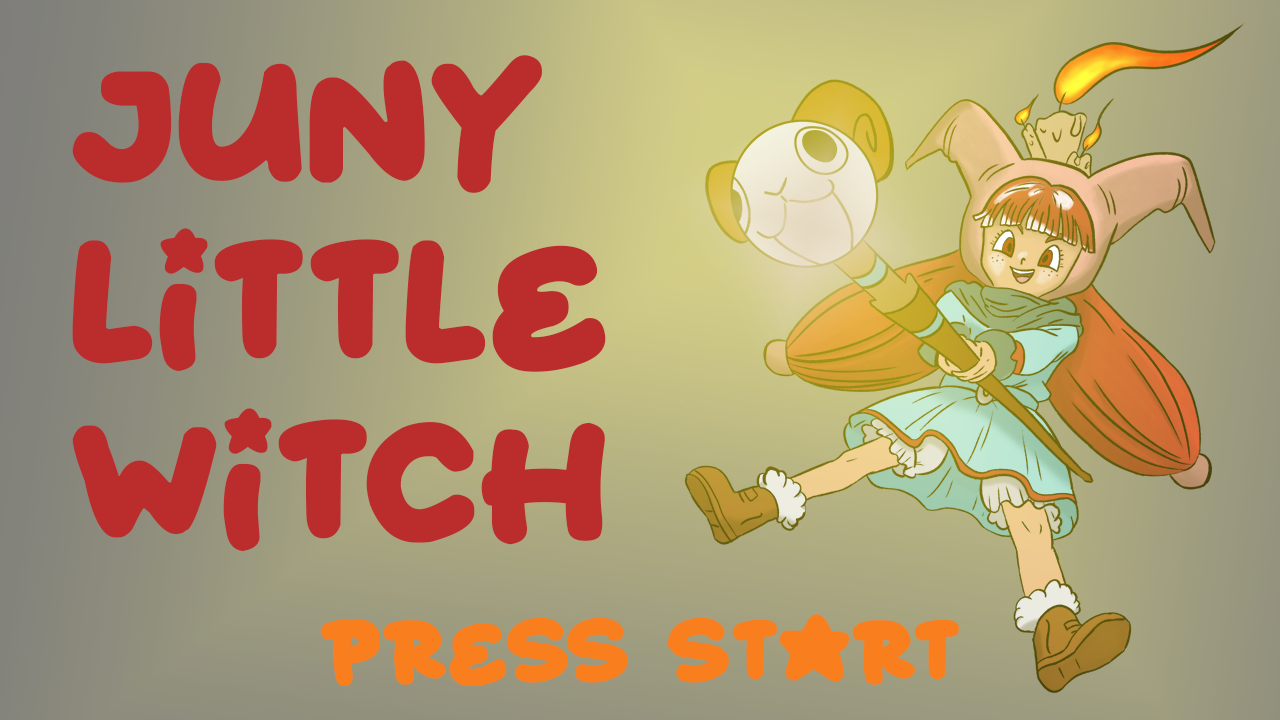
<style>
.page{position:relative;width:1280px;height:720px}
.page>*{position:absolute;margin:0}
.t1{font:150px "Starborn";color:#bb2d2d}
.t2{font:75px "Starborn";color:#f97e1d}
</style>
<div class="page">
<p class="t1" style="left:72px;top:55px;width:534px;height:497px">juny little  witchc</p>
<p class="t2" style="left:320px;top:614px;width:639px;height:72px">press start</p>
</div>
